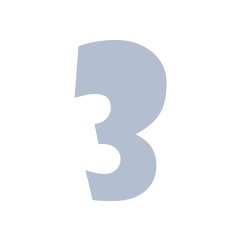
<style>
.page{position:relative;width:240px;height:240px;background:#ffffff}
.page>*{position:absolute;margin:0}
.t1{font:208.3px "ShowcardGothic-Reg";color:#b3bed1}
</style>
<div class="page">
<p class="t1" style="left:74px;top:40px;width:93px;height:161px">3</p>
</div>
